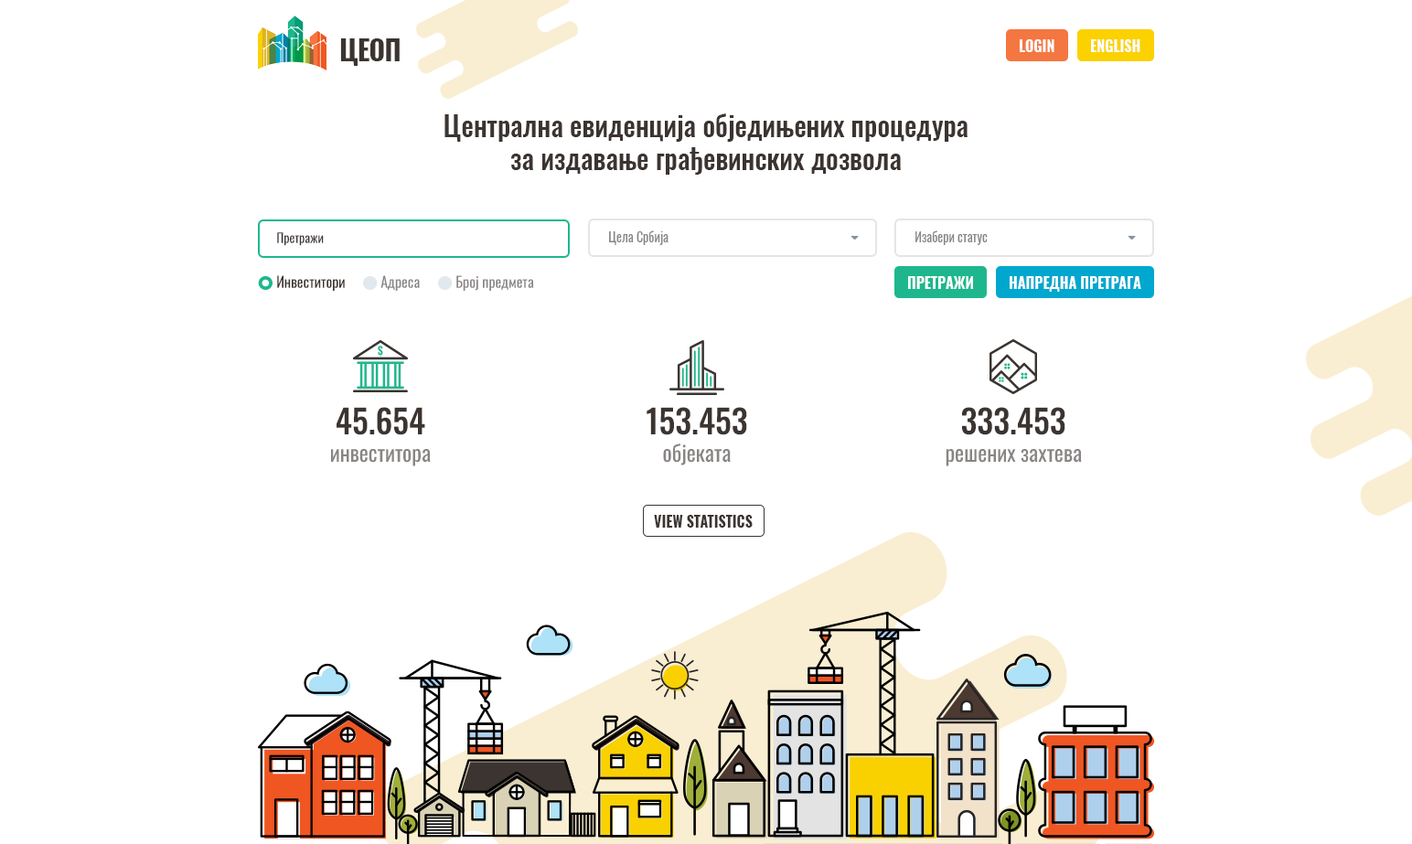
<style>
.page{position:relative;width:1412px;height:844px;background:#ffffff}
.page>*{position:absolute;margin:0}
.t1{font:27.4px "Oswald-Bold";letter-spacing:-0.025em;color:#3b3430}
.t2{font:14.6px "Oswald-Bold";color:#ffffff}
.t3{font:27.4px "Oswald-Medium";color:#3b3430}
.t4{font:12.8px "Oswald-Regular";color:#3b3430}
.t5{font:12.8px "Oswald-Regular";color:#888583}
.t6{font:14.6px "Oswald-Regular";color:#3b3430}
.t7{font:14.6px "Oswald-Regular";color:#888583}
.t8{font:14.6px "Oswald-Bold";color:#ffffff;text-transform:uppercase}
.t9{font:11px "Oswald-Bold";color:#1eb78d}
.t10{font:32.9px "Oswald-Medium";color:#3b3430}
.t11{font:22px "Oswald-Regular";color:#888583}
.t12{font:14.6px "Oswald-Bold";color:#3b3430}
</style>
<div class="page">
<p class="t1" style="left:340px;top:38px;width:60px;height:28px">ЦЕОП</p>
<p class="t2" style="left:1020px;top:39px;width:35px;height:13px">LOGIN</p>
<p class="t2" style="left:1091px;top:39px;width:50px;height:13px">ENGLISH</p>
<p class="t3" style="left:445px;top:113px;width:523px;height:62px;text-align:center">Централна евиденција обједињених процедура <br>за издавање грађевинских дозвола</p>
<p class="t4" style="left:277px;top:232px;width:47px;height:14px">Претражи</p>
<p class="t5" style="left:609px;top:231px;width:60px;height:14px">Цела Србија</p>
<p class="t5" style="left:916px;top:231px;width:72px;height:14px">Изабери статус</p>
<p class="t6" style="left:277px;top:275px;width:68px;height:16px">Инвеститори</p>
<p class="t7" style="left:381px;top:275px;width:39px;height:16px">Адреса</p>
<p class="t7" style="left:456px;top:275px;width:78px;height:16px">Број предмета</p>
<p class="t8" style="left:908px;top:276px;width:65px;height:13px">Претражи</p>
<p class="t8" style="left:1010px;top:276px;width:132px;height:16px">Напредна Претрага</p>
<p class="t9" style="left:378px;top:345px;width:5px;height:12px">$</p>
<p class="t10" style="left:337px;top:407px;width:88px;height:28px">45.654</p>
<p class="t10" style="left:647px;top:407px;width:100px;height:28px">153.453</p>
<p class="t10" style="left:962px;top:407px;width:104px;height:28px">333.453</p>
<p class="t11" style="left:331px;top:449px;width:100px;height:18px">инвеститора</p>
<p class="t11" style="left:663px;top:444px;width:68px;height:22px">објеката</p>
<p class="t11" style="left:946px;top:449px;width:136px;height:18px">решених захтева</p>
<p class="t12" style="left:654px;top:515px;width:99px;height:13px">VIEW STATISTICS</p>
</div>
